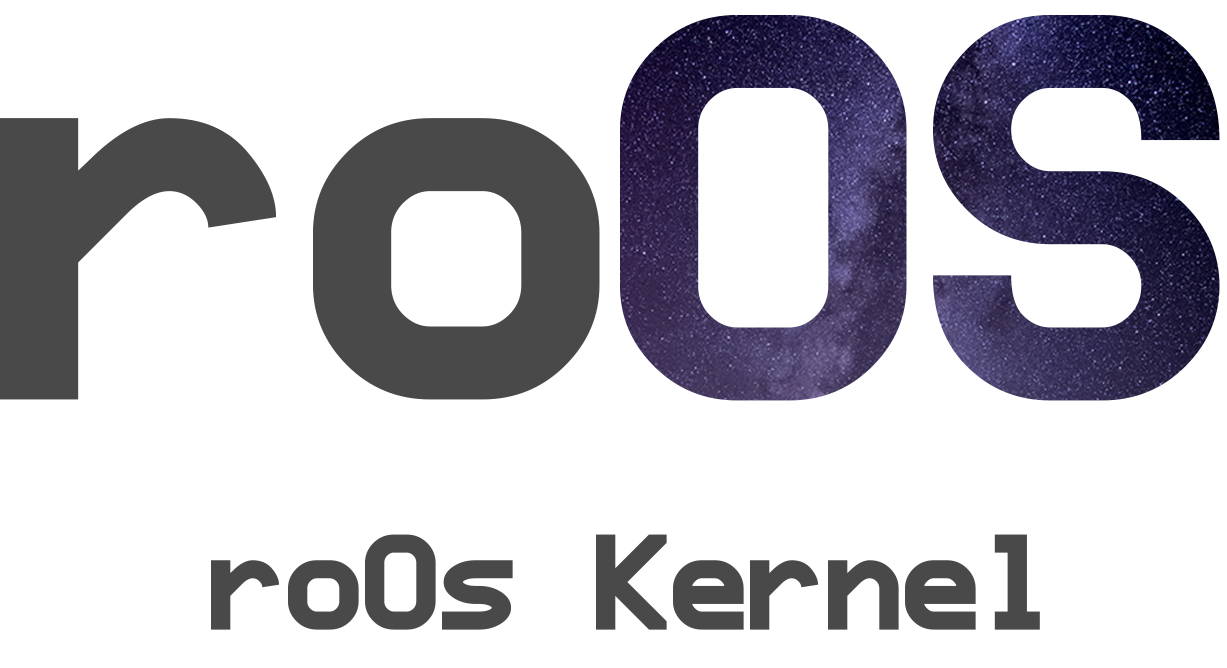
<style>
.page{position:relative;width:1227px;height:668px;background:#ffffff}
.page>*{position:absolute;margin:0}
.t1{font:625px "ProFontForPowerline-Bold"}
.t2{font:625px "ProFontForPowerline-Bold";color:#4a4949}
.t3{font:154.2px "ProFontForPowerline-Bold";color:#4a4949}
</style>
<div class="page">
<p class="t1" style="left:620px;top:15px;width:600px;height:386px">OS</p>
<p class="t2" style="left:0px;top:118px;width:600px;height:282px">ro</p>
<p class="t3" style="left:211px;top:534px;width:829px;height:96px">roOs Kernel</p>
</div>
